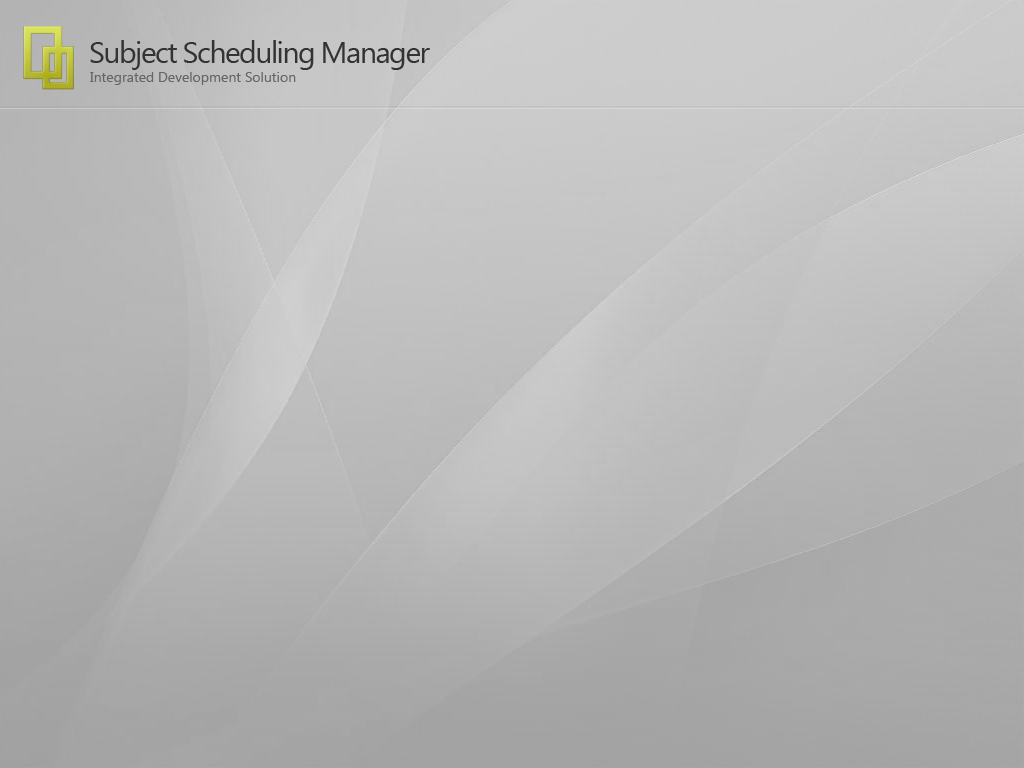
<style>
.page{position:relative;width:1024px;height:768px}
.page>*{position:absolute;margin:0}
.t1{font:30px "SegoeUI";letter-spacing:-0.05em;color:#333333}
.t2{font:14px "SegoeUI";color:#666666}
</style>
<div class="page">
<p class="t1" style="left:90px;top:40px;width:340px;height:30px">Subject Scheduling Manager</p>
<p class="t2" style="left:90px;top:72px;width:206px;height:13px">Integrated Development Solution</p>
</div>
